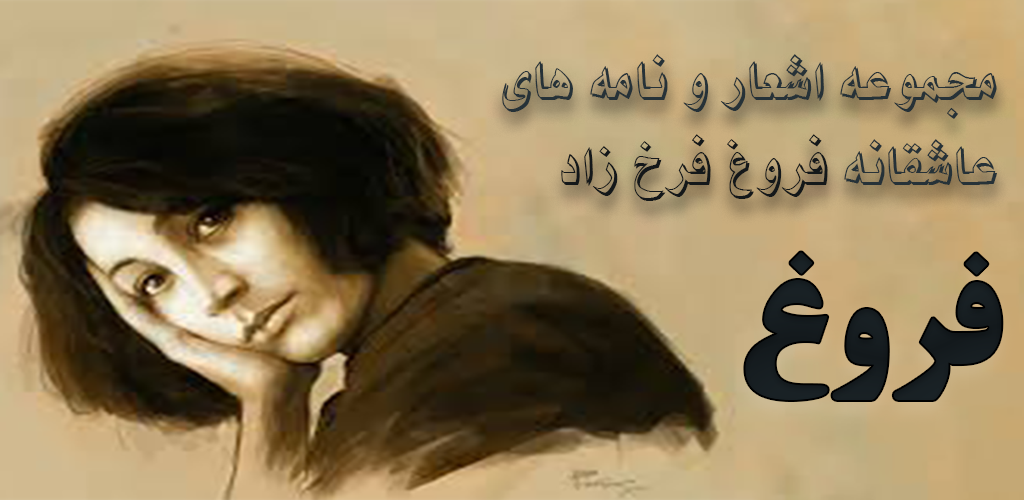
<style>
.page{position:relative;width:1024px;height:500px}
.page>*{position:absolute;margin:0}
.t1{font:70.8px "BNikiShadow";color:#263238}
.t2{font:70.8px "BNikiShadow";color:#14181a}
.t3{font:141.7px "BTitrBold";color:#161c20}
</style>
<div class="page">
<p class="t1" style="left:502px;top:54px;width:495px;height:147px;text-align:right">ىﺎﻫ ﻪﻣﺎﻧ ﻭ ﺭﺎﻌﺷﺍ ﻪﻋﻮﻤﺠﻣ<br><span class="t2">ﺩﺍﺯ ﺥﺮﻓ ﻍﻭﺮﻓ</span> ﻪﻧﺎﻘﺷﺎﻋ</p>
<p class="t3" style="left:745px;top:252px;width:257px;height:148px">ﻍﻭﺮﻓ</p>
</div>
